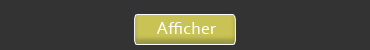
<style>
.page{position:relative;width:370px;height:50px;background:#333333}
.page>*{position:absolute;margin:0}
.t1{font:18px "Corbel";letter-spacing:0.01em;color:#ffffff}
</style>
<div class="page">
<p class="t1" style="left:156px;top:22px;width:60px;height:12px">Afficher</p>
</div>
